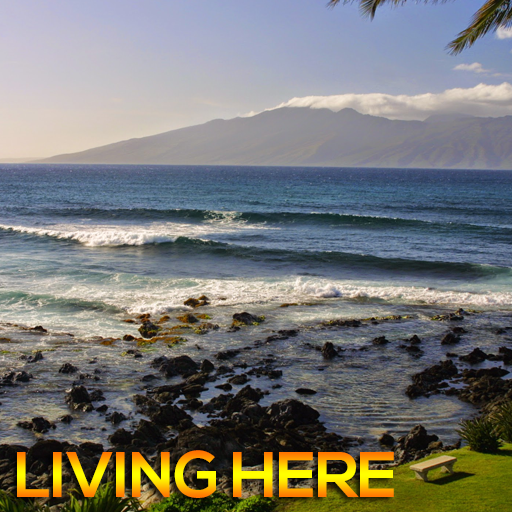
<style>
.page{position:relative;width:512px;height:512px}
.page>*{position:absolute;margin:0}
.t1{font:64.5px "NexaBold";letter-spacing:-0.02em}
</style>
<div class="page">
<p class="t1" style="left:17px;top:450px;width:377px;height:48px">LIVING HERE</p>
</div>
